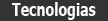
<style>
.page{position:relative;width:108px;height:21px;background:#333333}
.page>*{position:absolute;margin:0}
.t1{font:17.9px "Tahoma-Bold";color:#fcfafa;scale:0.79 1}
</style>
<div class="page">
<p class="t1" style="left:12px;top:2px;width:84px;height:18px">Tecnologias</p>
</div>
